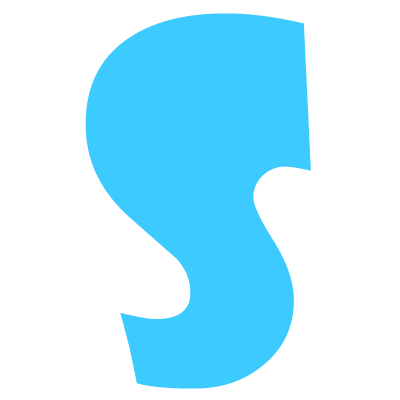
<style>
.page{position:relative;width:400px;height:400px;background:#ffffff}
.page>*{position:absolute;margin:0}
.t1{font:480px "ShowcardGothic-Reg";color:#3ccaff}
</style>
<div class="page">
<p class="t1" style="left:85px;top:13px;width:226px;height:376px">S</p>
</div>
